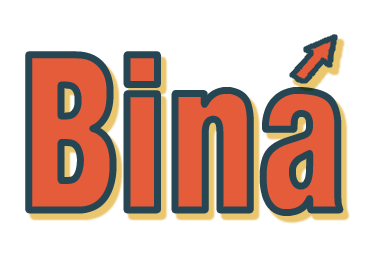
<style>
.page{position:relative;width:379px;height:272px;background:#ffffff}
.page>*{position:absolute;margin:0}
.t1{font:215.2px "Harvest";letter-spacing:0.03em;color:#e45c3a;scale:0.78 1}
</style>
<div class="page">
<p class="t1" style="left:28px;top:54px;width:312px;height:159px">Bina</p>
</div>
